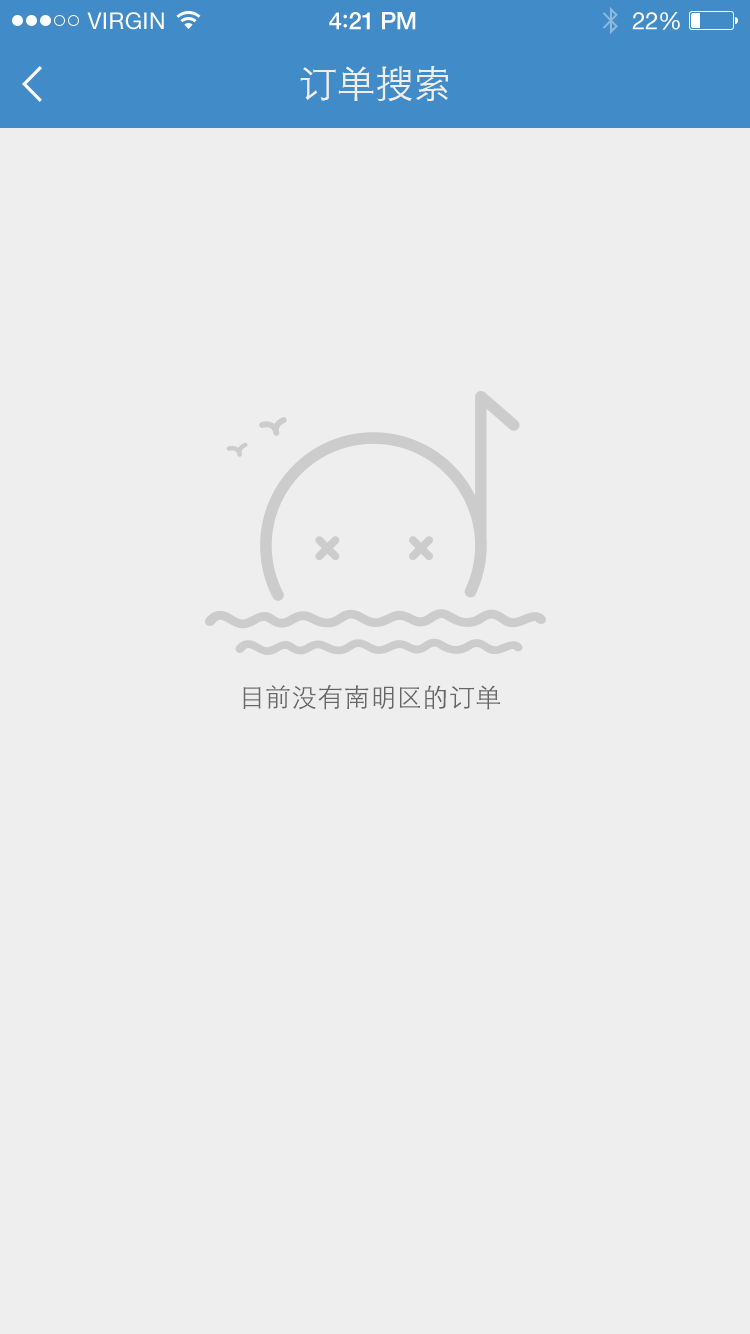
<style>
.page{position:relative;width:750px;height:1334px;background:#eeeeee}
.page>*{position:absolute;margin:0}
.t1{font:23px "HelveticaNeue";letter-spacing:0.02em;color:#ffffff}
.t2{font:24px "HelveticaNeue-Medium";letter-spacing:-0.02em;color:#ffffff}
.t3{font:26px "Avenir-Medium";letter-spacing:-0.02em;color:#ffffff}
.t4{font:24px "HelveticaNeue";letter-spacing:-0.02em;color:#ffffff}
.t5{font:38px "STXihei";color:#eeeeee}
.t6{font:26px "STXihei";letter-spacing:0.01em;color:#666666}
</style>
<div class="page">
<p class="t1" style="left:87px;top:12px;width:77px;height:18px">VIRGIN</p>
<p class="t2" style="left:329px;top:12px;width:87px;height:18px">4<span class="t3">:</span>21 PM</p>
<p class="t4" style="left:632px;top:12px;width:48px;height:18px">22%</p>
<p class="t5" style="left:300px;top:66px;width:148px;height:36px">订单搜索</p>
<p class="t6" style="left:243px;top:685px;width:257px;height:25px">目前没有南明区的订单</p>
</div>
